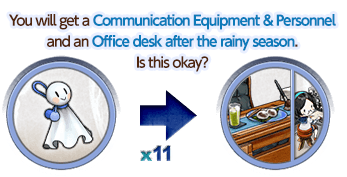
<style>
.page{position:relative;width:347px;height:177px;background:#ffffff}
.page>*{position:absolute;margin:0}
.t1{font:14px/21px "UDShinGoPro-Bold";letter-spacing:-0.085em;color:#0d7bba}
.t2{font:14px/21px "UDShinGoPro-DeBold";letter-spacing:-0.085em;color:#50260d}
</style>
<div class="page">
<p class="t1" style="left:9px;top:14px;width:327px;height:58px;text-align:center"><span class="t2">You will get a </span>Communication Equipment &amp; Personnel<span class="t2"><br>and an </span>Office desk after the rainy season<span class="t2">.<br>Is this okay?</span></p>
</div>
